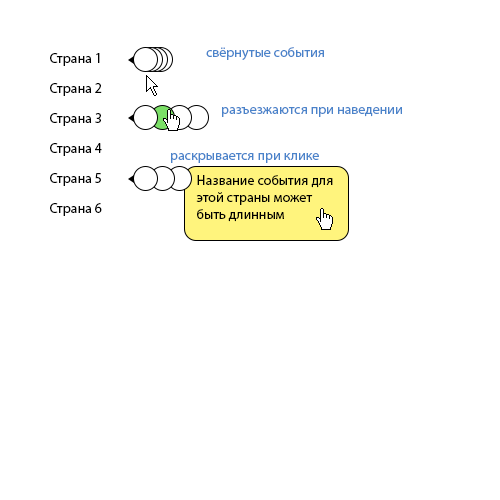
<style>
.page{position:relative;width:500px;height:500px;background:#ffffff}
.page>*{position:absolute;margin:0}
.t1{font:14px/30px "MyriadPro-Regular";color:#000000}
.t2{font:14px "MyriadPro-Regular";color:#4a83ca}
.t3{font:14px "MyriadPro-Regular";color:#000000}
</style>
<div class="page">
<p class="t1" style="left:50px;top:53px;width:52px;height:163px;text-align:right">Страна 1<br>Страна 2<br>Страна 3<br>Страна 4<br>Страна 5<br>Страна 6</p>
<p class="t2" style="left:206px;top:47px;width:118px;height:13px">свёрнутые события</p>
<p class="t2" style="left:222px;top:107px;width:180px;height:10px">разъезжаются при наведении</p>
<p class="t2" style="left:171px;top:153px;width:148px;height:10px">раскрывается при клике</p>
<p class="t3" style="left:196px;top:175px;width:137px;height:47px">Название события для этой страны может быть длинным</p>
</div>
